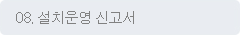
<style>
.page{position:relative;width:240px;height:35px;background:#e9ecf1}
.page>*{position:absolute;margin:0}
.t1{font:14.7px "Dotum";letter-spacing:-0.1em;color:#818181}
</style>
<div class="page">
<p class="t1" style="left:16px;top:11px;width:118px;height:13px">08. 설치운영 신고서</p>
</div>
